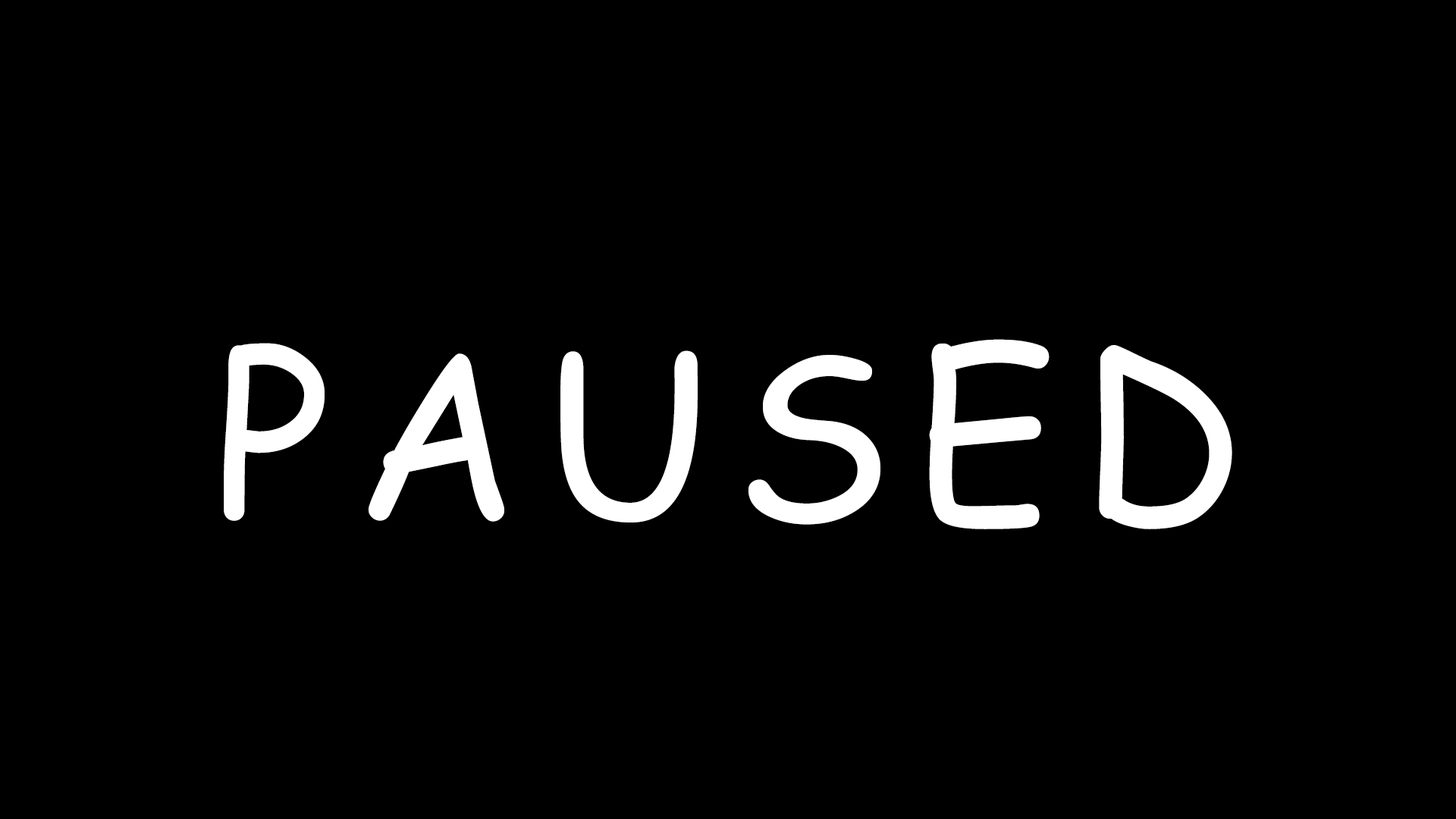
<style>
.page{position:relative;width:1456px;height:819px;background:#000000}
.page>*{position:absolute;margin:0}
.t1{font:227.5px "ComicSansMS";letter-spacing:0.1em;color:#ffffff;text-transform:uppercase}
</style>
<div class="page">
<p class="t1" style="left:224px;top:339px;width:1008px;height:190px">Paused</p>
</div>
